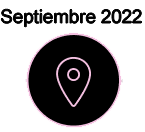
<style>
.page{position:relative;width:145px;height:132px;background:#ffffff}
.page>*{position:absolute;margin:0}
.t1{font:18.7px "ArialMT";color:#000000}
</style>
<div class="page">
<p class="t1" style="left:1px;top:9px;width:141px;height:18px">Septiembre 2022</p>
</div>
